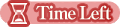
<style>
.page{position:relative;width:120px;height:27px}
.page>*{position:absolute;margin:0}
.t1{font:18px "RyuminPro-ExBold";letter-spacing:-0.08em;color:#fffff7}
</style>
<div class="page">
<p class="t1" style="left:36px;top:5px;width:75px;height:15px">Time Left</p>
</div>
